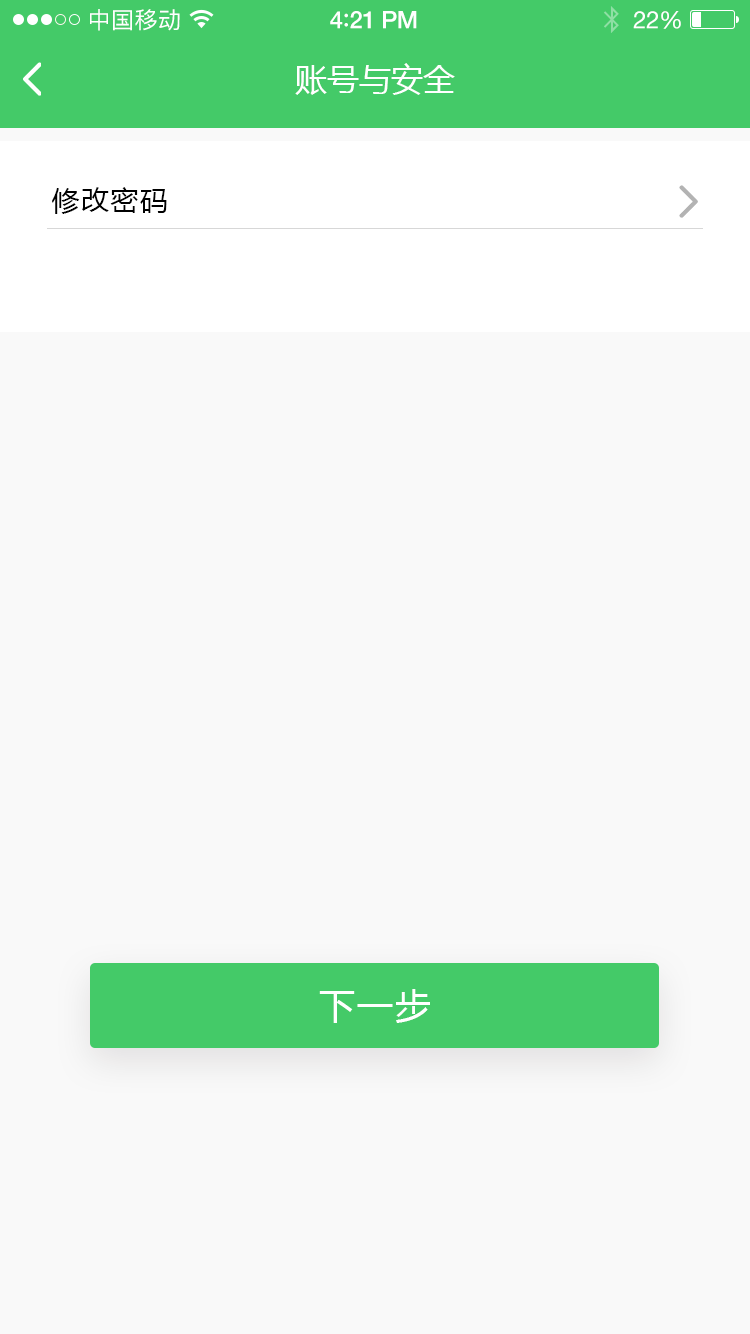
<style>
.page{position:relative;width:750px;height:1334px;background:#f9f9f9}
.page>*{position:absolute;margin:0}
.t1{font:23px "PingFangSC-Regular";letter-spacing:0.02em;color:#ffffff}
.t2{font:24px "HelveticaNeue-Medium";letter-spacing:-0.02em;color:#ffffff}
.t3{font:26px "Avenir-Medium";letter-spacing:-0.02em;color:#ffffff}
.t4{font:24px "HelveticaNeue";letter-spacing:-0.02em;color:#ffffff}
.t5{font:32px "MicrosoftYaHei";color:#ffffff;text-transform:uppercase}
.t6{font:28px "MicrosoftYaHei";letter-spacing:0.05em;color:#010101;text-transform:uppercase}
.t7{font:36px "MicrosoftYaHei";letter-spacing:0.06em;color:#ffffff;text-transform:uppercase}
</style>
<div class="page">
<p class="t1" style="left:90px;top:9px;width:90px;height:22px">中国移动</p>
<p class="t2" style="left:330px;top:11px;width:87px;height:18px">4<span class="t3">:</span>21 PM</p>
<p class="t4" style="left:633px;top:11px;width:48px;height:18px">22%</p>
<p class="t5" style="left:295px;top:63px;width:160px;height:32px">账号与安全</p>
<p class="t6" style="left:52px;top:187px;width:115px;height:27px">修改密码</p>
<p class="t7" style="left:319px;top:989px;width:111px;height:34px">下一步</p>
</div>
